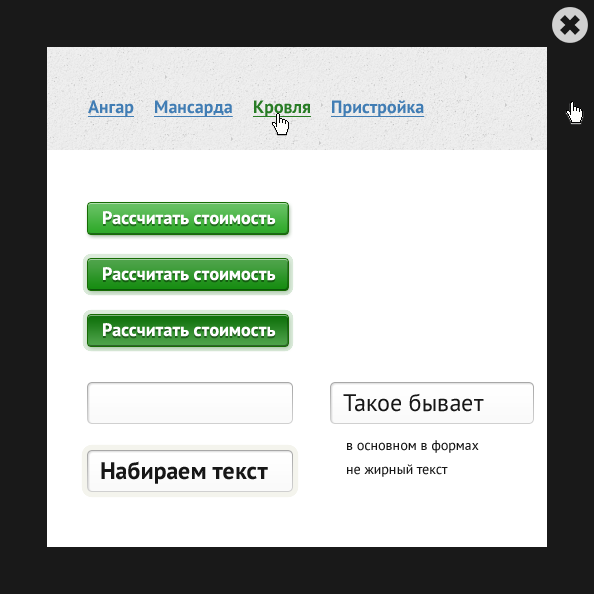
<style>
.page{position:relative;width:594px;height:594px;background:#ffffff}
.page>*{position:absolute;margin:0}
.t1{font:18px "PTSans-Bold";color:#417db4;text-decoration:underline}
.t2{font:18px "PTSans-Bold";color:#287c25;text-decoration:underline}
.t3{font:18px "PTSans-Bold";color:#fefefe}
.t4{font:24px "PTSans-Regular";color:#171717}
.t5{font:14px/24px "PTSans-Regular";color:#171717}
.t6{font:24px "PTSans-Bold";color:#171717}
</style>
<div class="page">
<p class="t1" style="left:88px;top:100px;width:46px;height:17px">Ангар</p>
<p class="t1" style="left:154px;top:100px;width:79px;height:17px">Мансарда</p>
<p class="t2" style="left:253px;top:100px;width:58px;height:17px">Кровля</p>
<p class="t1" style="left:331px;top:100px;width:94px;height:17px">Пристройка</p>
<p class="t3" style="left:103px;top:211px;width:173px;height:14px">Рассчитать стоимость</p>
<p class="t3" style="left:103px;top:267px;width:173px;height:14px">Рассчитать стоимость</p>
<p class="t3" style="left:103px;top:323px;width:173px;height:14px">Рассчитать стоимость</p>
<p class="t4" style="left:343px;top:393px;width:141px;height:19px">Такое бывает</p>
<p class="t5" style="left:347px;top:440px;width:132px;height:37px">в основном в формах<br>не жирный текст</p>
<p class="t6" style="left:101px;top:461px;width:167px;height:23px">Набираем текст</p>
</div>
